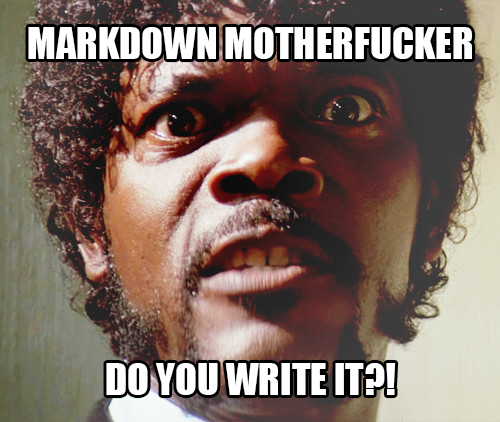
<style>
.page{position:relative;width:500px;height:422px}
.page>*{position:absolute;margin:0}
.t1{font:40px "Impact";color:#ffffff;text-transform:uppercase}
</style>
<div class="page">
<p class="t1" style="left:28px;top:27px;width:444px;height:368px;text-align:center">Markdown Motherfucker<br><br><br><br><br><br><br>Do you write it?!</p>
</div>
